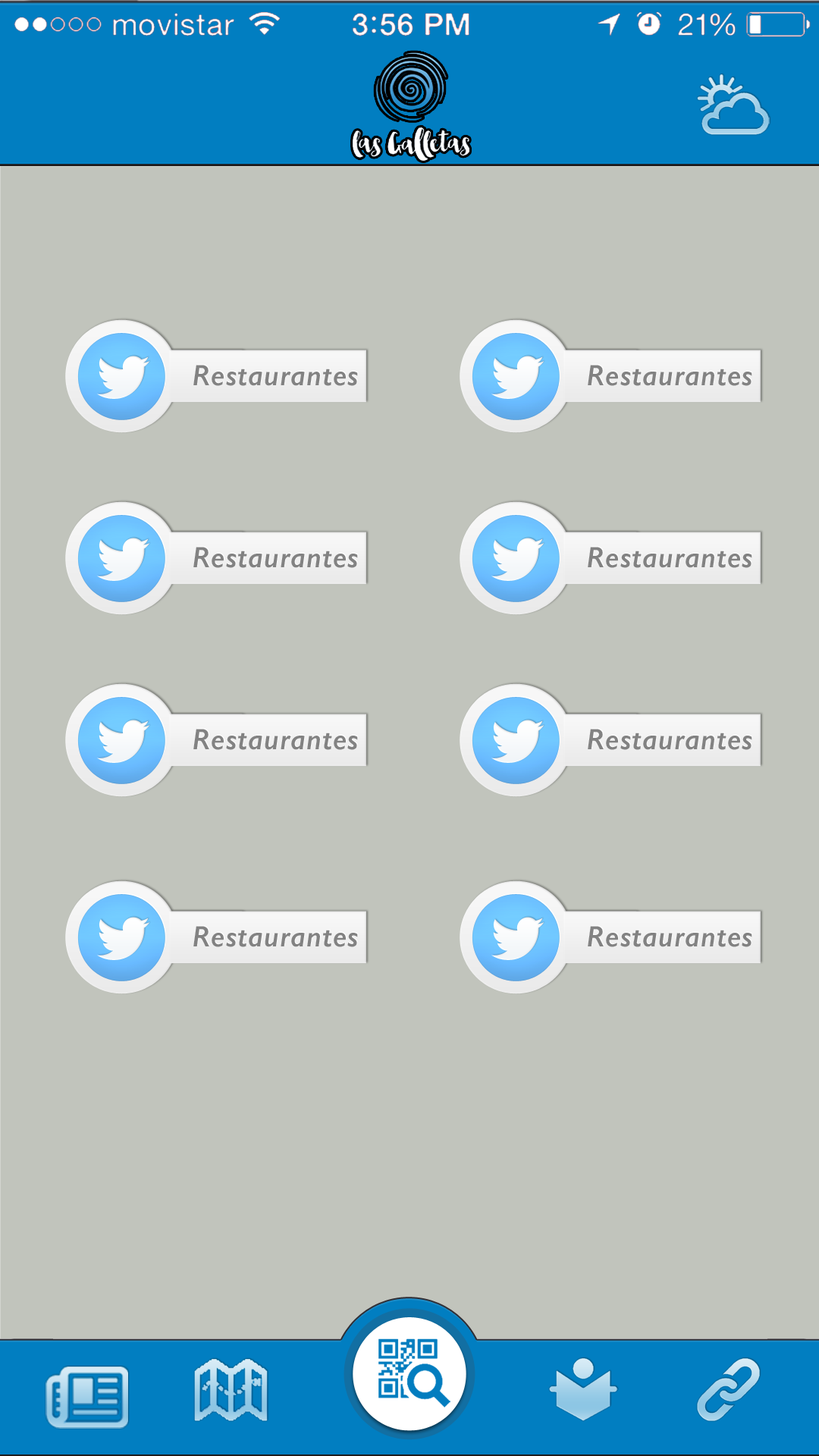
<style>
.page{position:relative;width:819px;height:1456px;background:#c1c4bc}
.page>*{position:absolute;margin:0}
.t1{font:29.6px "GillSans-SemiBoldItalic";letter-spacing:0.025em;color:#828282}
</style>
<div class="page">
<p class="t1" style="left:193px;top:365px;width:165px;height:21px">Restaurantes</p>
<p class="t1" style="left:588px;top:365px;width:164px;height:21px">Restaurantes</p>
<p class="t1" style="left:193px;top:547px;width:165px;height:21px">Restaurantes</p>
<p class="t1" style="left:588px;top:547px;width:164px;height:21px">Restaurantes</p>
<p class="t1" style="left:193px;top:729px;width:165px;height:21px">Restaurantes</p>
<p class="t1" style="left:588px;top:729px;width:164px;height:21px">Restaurantes</p>
<p class="t1" style="left:193px;top:926px;width:165px;height:21px">Restaurantes</p>
<p class="t1" style="left:588px;top:926px;width:164px;height:21px">Restaurantes</p>
</div>
